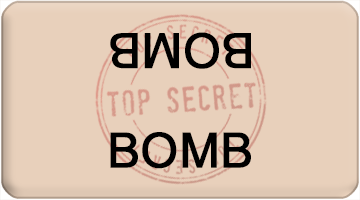
<style>
.page{position:relative;width:360px;height:200px;background:#e8d0bb}
.page>*{position:absolute;margin:0}
.t1{font:48px "ArialMT";color:#000000;font-weight:bold}
</style>
<div class="page">
<p class="t1" style="left:110px;top:32px;width:141px;height:37px;rotate:180deg">BOMB</p>
<p class="t1" style="left:110px;top:132px;width:141px;height:37px">BOMB</p>
</div>
